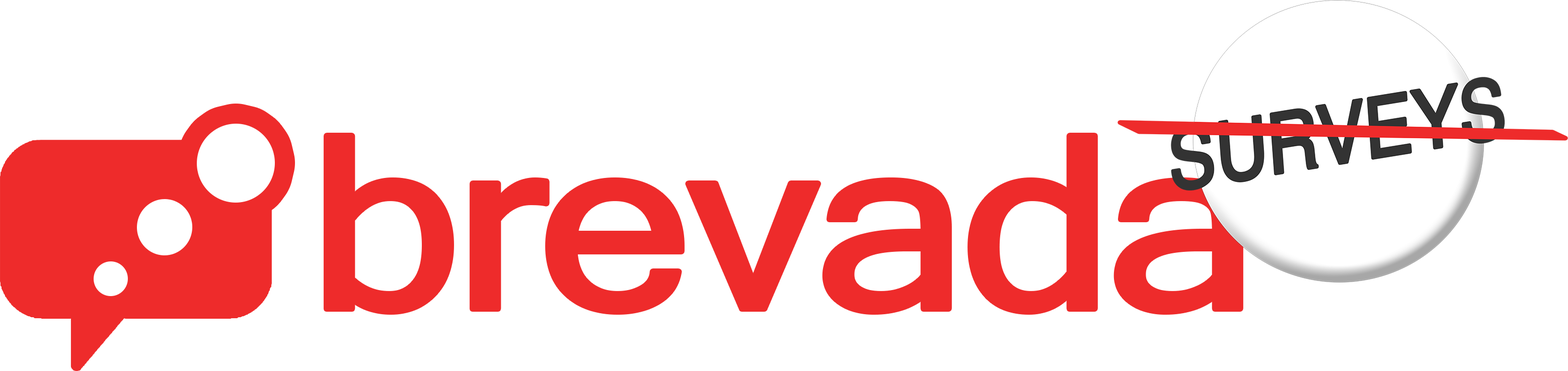
<style>
.page{position:relative;width:1568px;height:371px;background:#ffffff}
.page>*{position:absolute;margin:0}
.t1{font:241.9px "MicrosoftSansSerif";letter-spacing:-0.025em;color:#ee2b2b;scale:1.13 1}
</style>
<div class="page">
<p class="t1" style="left:326px;top:136px;width:914px;height:176px">brevada</p>
</div>
